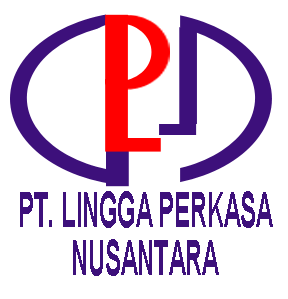
<style>
.page{position:relative;width:288px;height:299px;background:#ffffff}
.page>*{position:absolute;margin:0}
.t1{font:48px "Arial-BoldMT";color:#3d107b;scale:0.49 1}
</style>
<div class="page">
<p class="t1" style="left:20px;top:191px;width:253px;height:85px;text-align:center">PT. LINGGA PERKASA<br>NUSANTARA</p>
</div>
